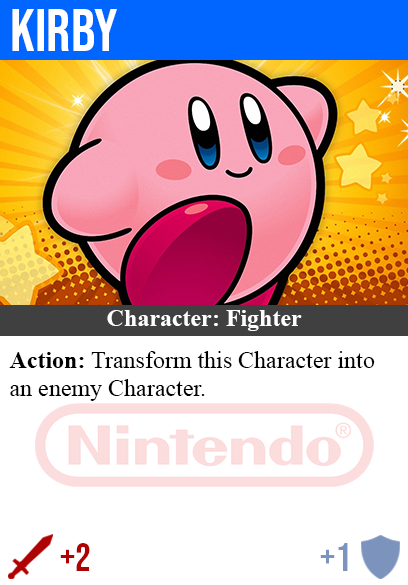
<style>
.page{position:relative;width:408px;height:585px;background:#ffffff}
.page>*{position:absolute;margin:0}
.t1{font:60px "BebasNeue-Regular";color:#ffffff}
.t2{font:24px "TimesNewRomanPS-BoldMT";color:#ffffff}
.t3{font:24px "TimesNewRomanPSMT";color:#000000}
.t4{font:24px "TimesNewRomanPS-BoldMT";color:#000000}
.t5{font:40px "BebasNeue-Regular";color:#af0202}
.t6{font:40px "BebasNeue-Regular";color:#7c94bd}
</style>
<div class="page">
<p class="t1" style="left:12px;top:9px;width:105px;height:42px">kirby</p>
<p class="t2" style="left:107px;top:310px;width:195px;height:21px">Character: Fighter</p>
<p class="t3" style="left:9px;top:351px;width:366px;height:50px"><span class="t4">Action:</span> Transform this Character into<br>an enemy Character.</p>
<p class="t5" style="left:60px;top:543px;width:30px;height:28px">+2</p>
<p class="t6" style="left:320px;top:543px;width:28px;height:28px">+1</p>
</div>
